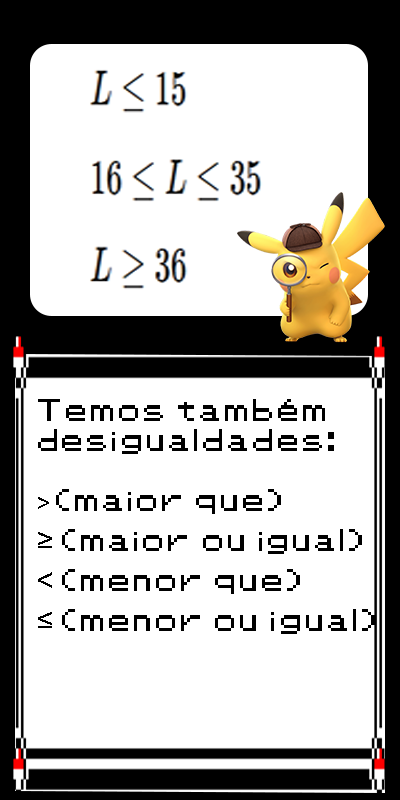
<style>
.page{position:relative;width:400px;height:800px;background:#ffffff}
.page>*{position:absolute;margin:0}
.t1{font:25px "Pokemon-Classic";color:#000000}
.t2{font:25px "Playbill";color:#000000}
.t3{font:33.3px "Playbill";color:#000000}
</style>
<div class="page">
<p class="t1" style="left:38px;top:399px;width:337px;height:235px">Temos também<br>desigualdades:<br><br><span class="t2">&gt; </span>(maior que)<br><span class="t3">≥ </span>(maior ou igual)<br><span class="t3">&lt; </span>(menor que)<br><span class="t3">≤ </span>(menor ou igual)</p>
</div>
